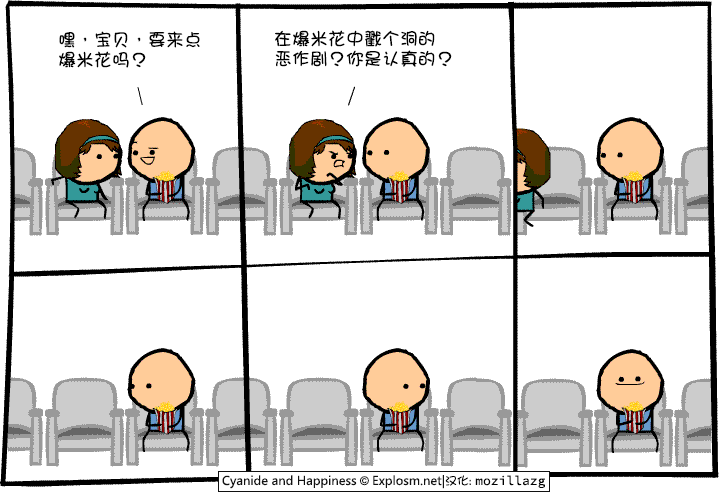
<style>
.page{position:relative;width:720px;height:500px;background:#ffffff}
.page>*{position:absolute;margin:0}
.t1{font:18px/20px "DFGirl";color:#000000}
</style>
<div class="page">
<p class="t1" style="left:275px;top:30px;width:177px;height:37px">在爆米花中戳个洞的<br>恶作剧？你是认真的？</p>
<p class="t1" style="left:59px;top:31px;width:141px;height:37px">嘿，宝贝，要来点<br>爆米花吗？</p>
</div>
